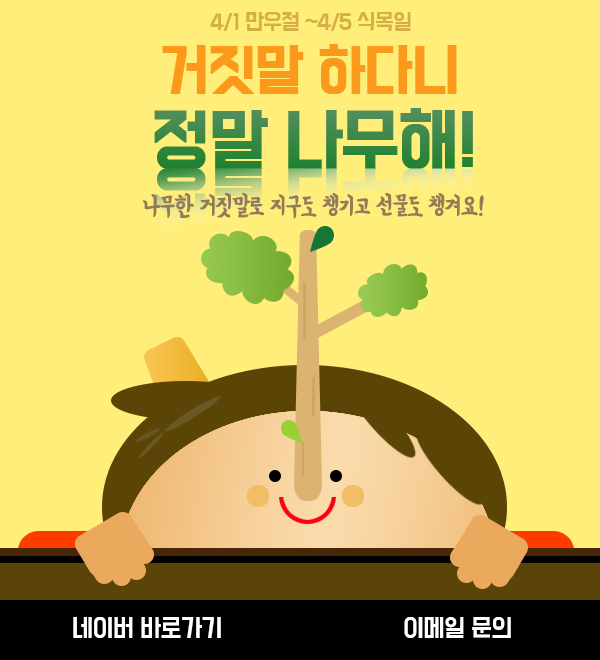
<style>
.page{position:relative;width:600px;height:660px;background:#ffee7a}
.page>*{position:absolute;margin:0}
.t1{font:19.6px "BMDoHyeon";letter-spacing:-0.05em;color:#d5af44}
.t2{font:25.2px "BMYEONSUNG";letter-spacing:-0.05em;color:#927b59;font-weight:bold;scale:0.96 1}
.t3{font:22.4px "BMDoHyeon";letter-spacing:-0.025em;color:#ffffff}
</style>
<div class="page">
<p class="t1" style="left:210px;top:12px;width:201px;height:19px">4/1 만우절 ~4/5 식목일</p>
<p class="t2" style="left:142px;top:192px;width:342px;height:27px">나무한 거짓말로 지구도 챙기고 선물도 챙겨요!</p>
<p class="t3" style="left:73px;top:617px;width:148px;height:21px">네이버 바로가기</p>
<p class="t3" style="left:404px;top:617px;width:107px;height:21px">이메일 문의</p>
</div>
